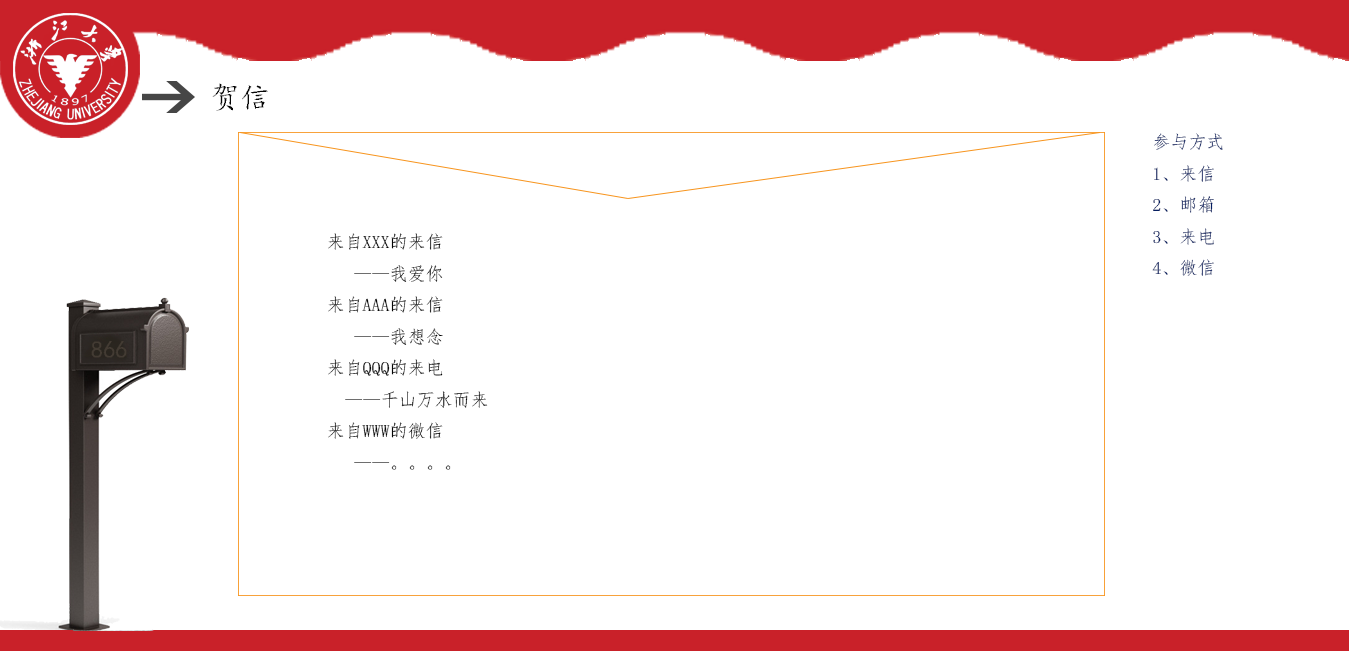
<style>
.page{position:relative;width:1349px;height:651px;background:#ffffff}
.page>*{position:absolute;margin:0}
.t1{font:30px "¿¬Ìå";color:#070707}
.t2{font:18px "·ÂËÎ";color:#051e61}
.t3{font:18px "·ÂËÎ";color:#060606}
</style>
<div class="page">
<p class="t1" style="left:212px;top:83px;width:56px;height:28px">贺信</p>
<p class="t2" style="left:1152px;top:133px;width:71px;height:143px">参与方式<br>1、来信<br>2、邮箱<br>3、来电<br>4、微信</p>
<p class="t3" style="left:328px;top:233px;width:160px;height:237px">来自XXX的来信<br>       ——我爱你<br>    来自AAA的来信<br>       ——我想念<br>    来自QQQ的来电<br>      ——千山万水而来<br>    来自WWW的微信<br>       ——。。。。</p>
</div>
